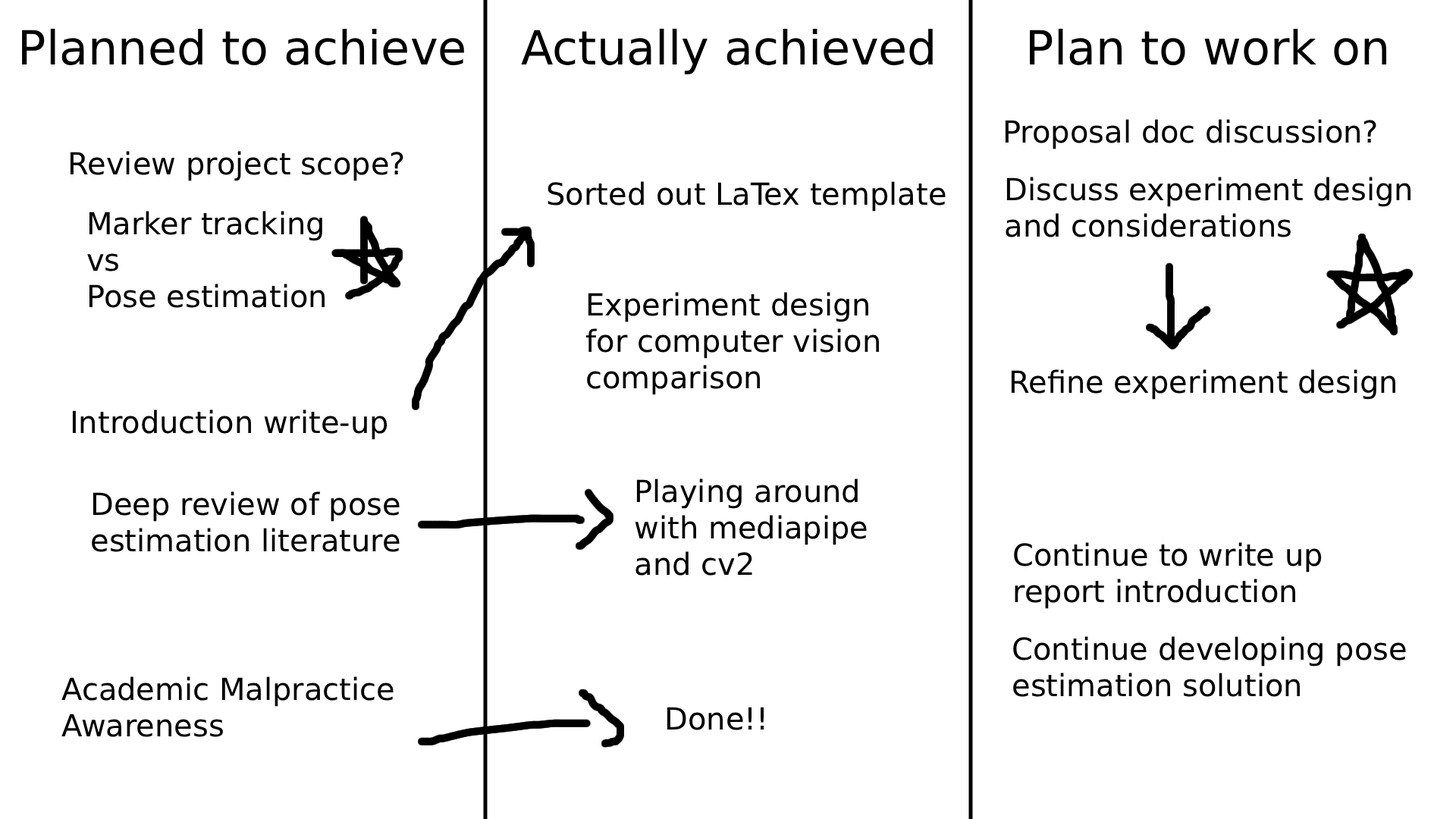
<style>
.page{position:relative;width:1456px;height:819px;background:#ffffff}
.page>*{position:absolute;margin:0}
.t1{font:47px "DejaVuSans";color:#000000}
.t2{font:30.3px "DejaVuSans";color:#000000}
</style>
<div class="page">
<p class="t1" style="left:22px;top:28px;width:442px;height:37px">Planned to achieve</p>
<p class="t1" style="left:521px;top:28px;width:412px;height:46px">Actually achieved</p>
<p class="t1" style="left:1030px;top:28px;width:357px;height:37px">Plan to work on</p>
<p class="t2" style="left:1005px;top:119px;width:371px;height:30px">Proposal doc discussion?</p>
<p class="t2" style="left:70px;top:151px;width:333px;height:30px">Review project scope?</p>
<p class="t2" style="left:548px;top:181px;width:398px;height:31px">Sorted out LaTex template</p>
<p class="t2" style="left:1006px;top:177px;width:404px;height:60px">Discuss experiment design <br>and considerations</p>
<p class="t2" style="left:87px;top:211px;width:238px;height:97px">Marker tracking<br>vs<br>Pose estimation</p>
<p class="t2" style="left:585px;top:292px;width:294px;height:103px">Experiment design<br>for computer vision<br>comparison</p>
<p class="t2" style="left:1011px;top:369px;width:384px;height:31px">Refine experiment design</p>
<p class="t2" style="left:72px;top:409px;width:316px;height:31px">Introduction write-up</p>
<p class="t2" style="left:635px;top:479px;width:232px;height:97px">Playing around<br>with mediapipe <br>and cv2</p>
<p class="t2" style="left:92px;top:491px;width:308px;height:61px">Deep review of pose<br>estimation literature</p>
<p class="t2" style="left:1014px;top:542px;width:308px;height:67px">Continue to write up<br>report introduction</p>
<p class="t2" style="left:1013px;top:636px;width:393px;height:61px">Continue developing pose<br>estimation solution</p>
<p class="t2" style="left:61px;top:676px;width:333px;height:61px">Academic Malpractice<br>Awareness</p>
<p class="t2" style="left:667px;top:707px;width:97px;height:23px">Done!!</p>
</div>
